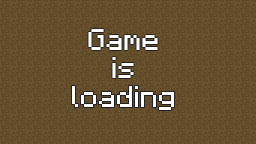
<style>
.page{position:relative;width:256px;height:144px;background:#634d2a}
.page>*{position:absolute;margin:0}
.t1{font:24px "Minecraft";color:#fdfdfd}
</style>
<div class="page">
<p class="t1" style="left:72px;top:29px;width:102px;height:81px;text-align:center">Game<br>is<br>loading</p>
</div>
